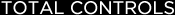
<style>
.page{position:relative;width:175px;height:15px;background:#000000}
.page>*{position:absolute;margin:0}
.t1{font:17.9px "GothamHTF-Book";color:#ffffff}
</style>
<div class="page">
<p class="t1" style="left:1px;top:1px;width:173px;height:14px">TOTAL CONTROLS</p>
</div>
